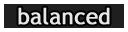
<style>
.page{position:relative;width:128px;height:32px;background:#1f1f1f}
.page>*{position:absolute;margin:0}
.t1{font:22px "TrebuchetMS";color:#e6e6e6;font-weight:bold}
</style>
<div class="page">
<p class="t1" style="left:18px;top:7px;width:92px;height:18px">balanced</p>
</div>
